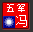
<style>
.page{position:relative;width:33px;height:32px;background:#f20000}
.page>*{position:absolute;margin:0}
.t1{font:10.4px "SimSun";color:#ffffff}
.t2{font:11.7px "SimSun";color:#ffffff}
</style>
<div class="page">
<p class="t1" style="left:7px;top:4px;width:18px;height:8px">五军</p>
<p class="t2" style="left:16px;top:15px;width:11px;height:12px">冯</p>
</div>
